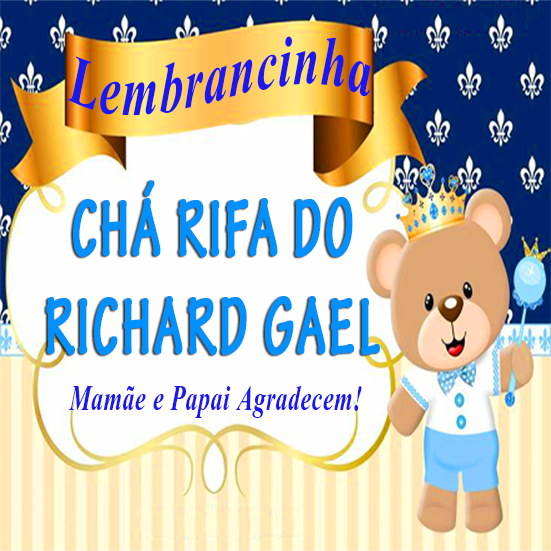
<style>
.page{position:relative;width:551px;height:551px;background:#fefefe}
.page>*{position:absolute;margin:0}
.t1{font:88.2px "Vijaya-Bold";letter-spacing:0.02em;color:#1c17ec;scale:0.67 1}
.t2{font:88.2px "Vijaya-Bold";letter-spacing:0.02em;color:#1c17ec;text-transform:uppercase;scale:0.67 1}
.t3{font:85.9px/98.4px "TektonPro-BoldCond";letter-spacing:0.04em;color:#0290fd;text-transform:uppercase;font-weight:bold;scale:0.67 1}
.t4{font:44.3px "Vijaya-Bold";letter-spacing:0.02em;color:#1c17ec;scale:0.67 1}
</style>
<div class="page">
<p class="t1" style="left:67px;top:36px;width:304px;height:80px"><span class="t2">l</span>embrancinha</p>
<p class="t3" style="left:46px;top:180px;width:334px;height:175px;text-align:center">chá rifa do<br>richard gael</p>
<p class="t4" style="left:68px;top:386px;width:294px;height:32px">Mamãe e Papai Agradecem!</p>
</div>
